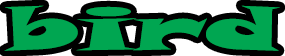
<style>
.page{position:relative;width:285px;height:56px;background:#00a651}
.page>*{position:absolute;margin:0}
.t1{font:60px "SnapITC-Regular";color:#00a651;scale:2 1}
</style>
<div class="page">
<p class="t1" style="left:4px;top:5px;width:276px;height:46px">bird</p>
</div>
